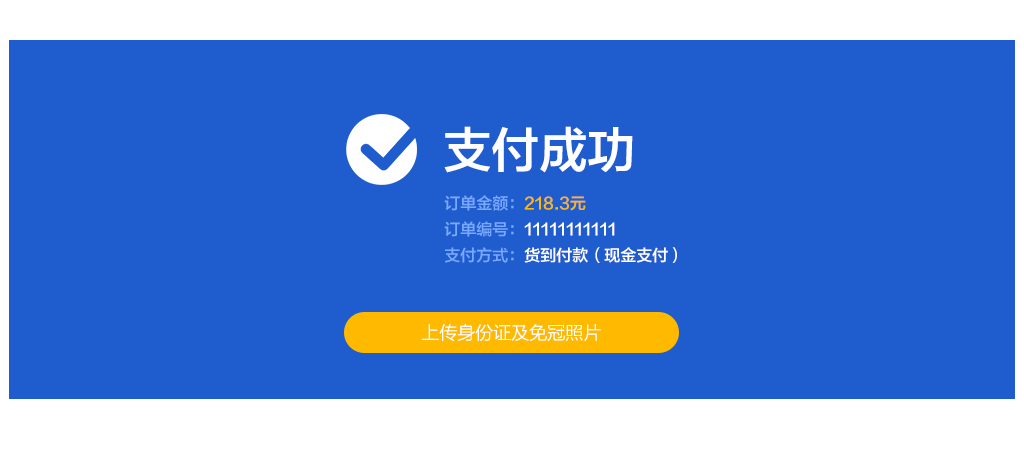
<style>
.page{position:relative;width:1024px;height:454px;background:#1f5dcf}
.page>*{position:absolute;margin:0}
.t1{font:48px "FZLTZHK--GBK1-0";color:#ffffff}
.t2{font:16px/26px "FZLTZHK--GBK1-0";color:#ffffff}
.t3{font:16px/26px "FZLTZHK--GBK1-0";color:#78a8ff}
.t4{font:16px/26px "FZLTZHK--GBK1-0";color:#ffba00}
.t5{font:18px "FZLTXHK--GBK1-0";color:#ffffff}
</style>
<div class="page">
<p class="t1" style="left:444px;top:126px;width:189px;height:47px">支付成功</p>
<p class="t2" style="left:444px;top:195px;width:233px;height:68px"><span class="t3">订单金额：</span><span class="t4">218.3元<br></span><span class="t3">订单编号：</span>11111111111<br><span class="t3">支付方式：</span>货到付款（现金支付）</p>
<p class="t5" style="left:421px;top:324px;width:180px;height:17px">上传身份证及免冠照片</p>
</div>
